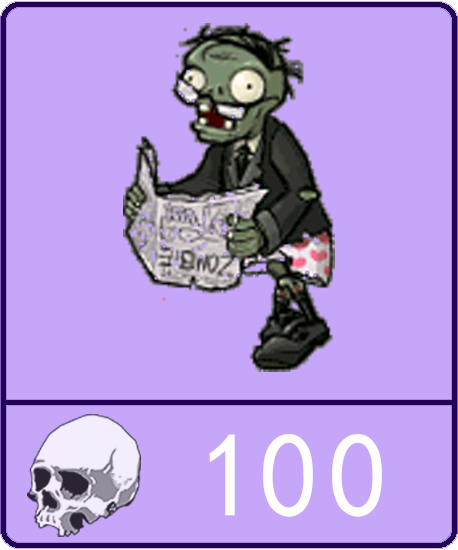
<style>
.page{position:relative;width:458px;height:550px;background:#c6a6f9}
.page>*{position:absolute;margin:0}
.t1{font:120px "SimHei";letter-spacing:0.075em;color:#fefefc}
.t2{font:120px "SimHei";color:#fefefc}
</style>
<div class="page">
<p class="t1" style="left:209px;top:434px;width:173px;height:83px"><span class="t2">1</span>00</p>
</div>
